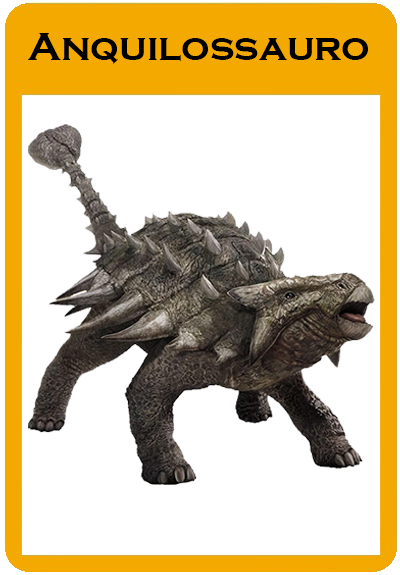
<style>
.page{position:relative;width:400px;height:575px;background:#ffffff}
.page>*{position:absolute;margin:0}
.t1{font:40px "CopperplateGothic-Bold";color:#000000}
</style>
<div class="page">
<p class="t1" style="left:28px;top:33px;width:340px;height:31px">Anquilossauro</p>
</div>
